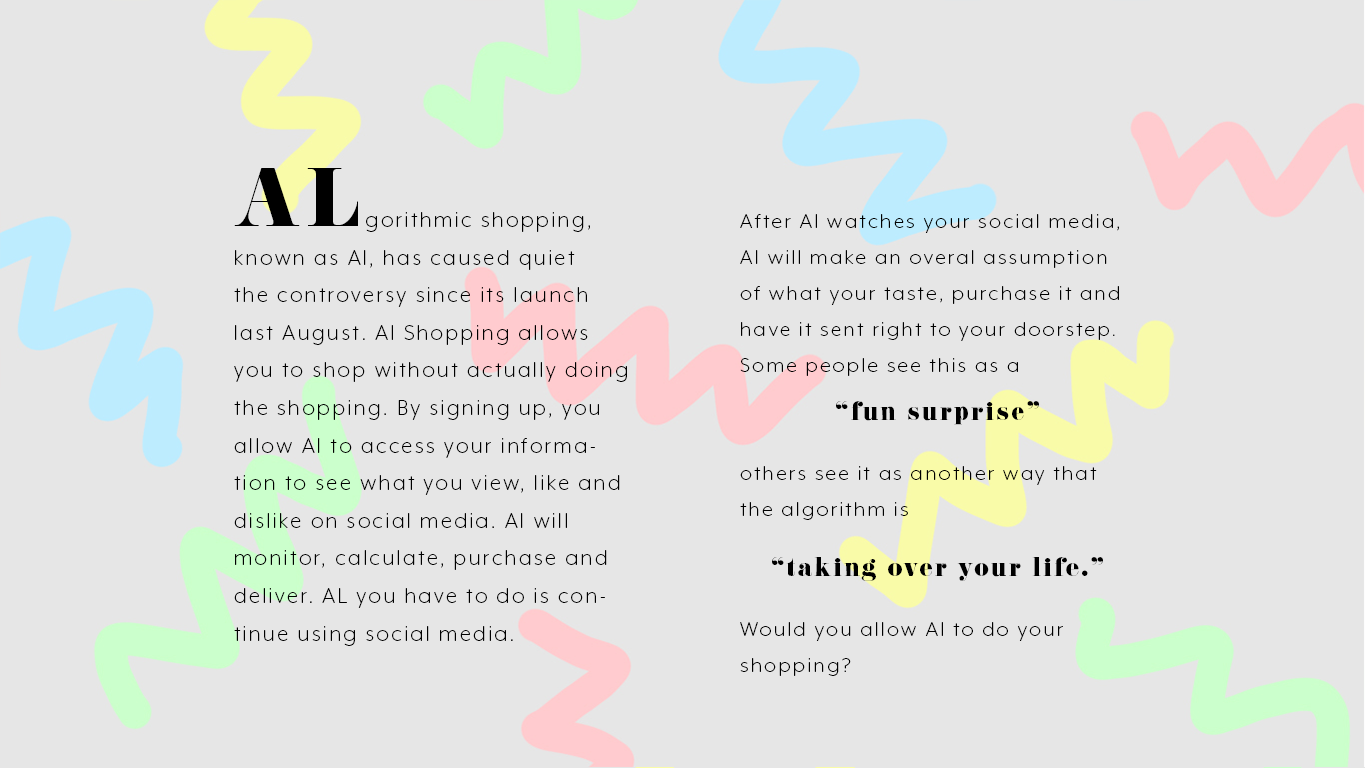
<style>
.page{position:relative;width:1366px;height:768px;background:#e6e6e6}
.page>*{position:absolute;margin:0}
.t1{font:72px "EloquentJFPro-Regular";letter-spacing:0.1em;color:#000000}
.t2{font:24px/37.6px "MrEavesXLModOT-Light";letter-spacing:0.1em;color:#000000}
.t3{font:23px/36px "MrEavesXLModOT-Light";letter-spacing:0.1em;color:#000000}
.t4{font:23px/24px "EloquentJFPro-Regular";letter-spacing:0.1em;color:#000000}
.t5{font:23px/24px "MrEavesXLModOT-Light";letter-spacing:0.1em;color:#000000}
.t6{font:23px/36px "EloquentJFPro-Regular";letter-spacing:0.1em;color:#000000}
</style>
<div class="page">
<p class="t1" style="left:234px;top:168px;width:124px;height:58px">AL</p>
<p class="t2" style="left:234px;top:212px;width:393px;height:434px">gorithmic shopping, known as Al, has caused quiet <br>the controversy since its launch last August. Al Shopping allows you to shop without actually doing the shopping. By signing up, you allow Al to access your information to see what you view, like and dislike on social media. Al will monitor, calculate, purchase and deliver. AL you have to do is continue using social media.</p>
<p class="t3" style="left:740px;top:214px;width:379px;height:462px">After Al watches your social media, Al will make an overal assumption of what your taste, purchase it and have it sent right to your doorstep. Some people see this as a <br><br><span class="t4">“fun surprise”<br><br></span><span class="t5">o</span>thers see it as another way that the algorithm is<br><br><span class="t4">“</span><span class="t6">taking over your life.”<br><br></span>Would you allow Al to do your <br>shopping?</p>
</div>
